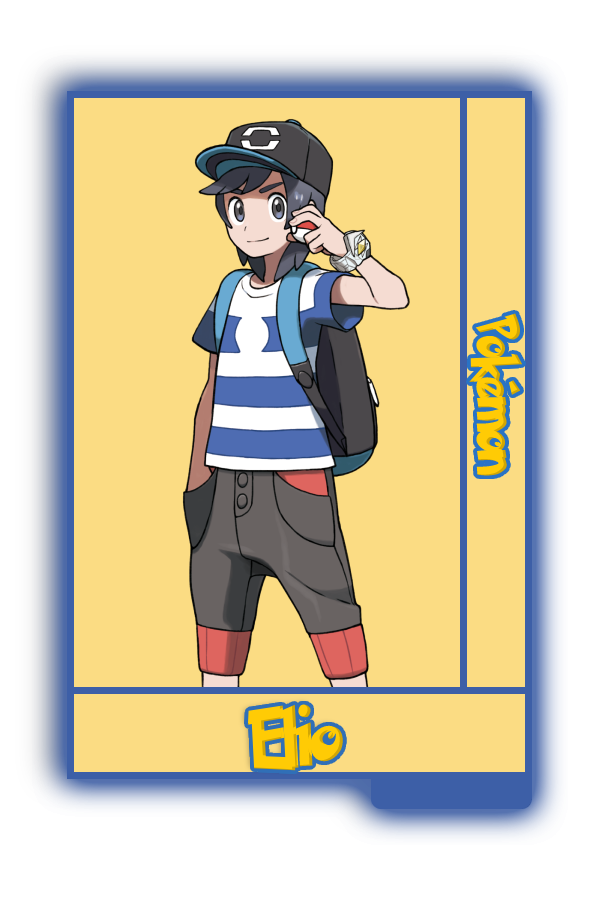
<style>
.page{position:relative;width:600px;height:900px;background:#fbdc83}
.page>*{position:absolute;margin:0}
.t1{font:48.8px "PokemonSolidNormal";color:#ffcb05;scale:0.8 1}
.t2{font:60.1px "PokemonSolidNormal";color:#ffcb05;scale:0.96 1}
</style>
<div class="page">
<p class="t1" style="left:469px;top:313px;width:54px;height:163px;rotate:90deg">Pokémon</p>
<p class="t2" style="left:247px;top:704px;width:96px;height:67px">Elio</p>
</div>
